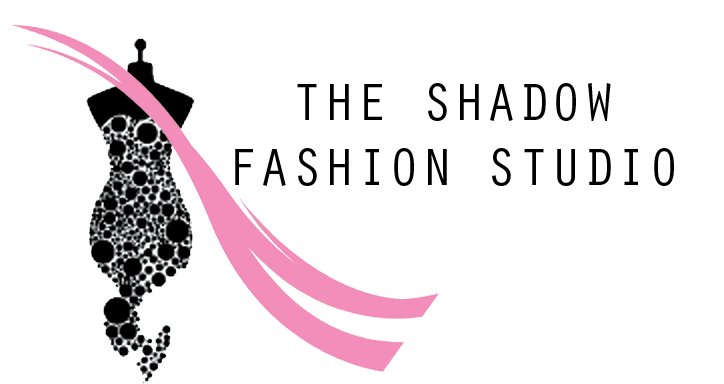
<style>
.page{position:relative;width:724px;height:384px;background:#ffffff}
.page>*{position:absolute;margin:0}
.t1{font:54.2px "OratorStd";color:#000000}
</style>
<div class="page">
<p class="t1" style="left:235px;top:83px;width:439px;height:103px;text-align:center">THE SHADOW<br>FASHION STUDIO</p>
</div>
